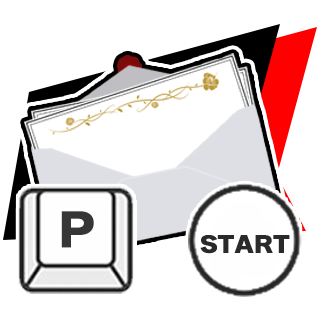
<style>
.page{position:relative;width:320px;height:320px;background:#ffffff}
.page>*{position:absolute;margin:0}
.t1{font:43.6px "WanpakuRuika-08";letter-spacing:0.05em;color:#363636;font-weight:bold;scale:1.1 1}
.t2{font:21.4px "WanpakuRuika-08";letter-spacing:-0.02em;color:#2a2a2a;font-weight:bold;scale:1.1 1}
</style>
<div class="page">
<p class="t1" style="left:61px;top:211px;width:33px;height:37px">P</p>
<p class="t2" style="left:200px;top:235px;width:90px;height:19px">START</p>
</div>
